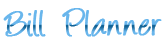
<style>
.page{position:relative;width:165px;height:45px;background:#ffffff}
.page>*{position:absolute;margin:0}
.t1{font:41.7px "Angelina";letter-spacing:-0.035em;color:#69b6ec;font-weight:bold;scale:0.9 1}
</style>
<div class="page">
<p class="t1" style="left:3px;top:8px;width:159px;height:29px">Bill  Planner</p>
</div>
